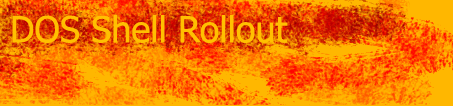
<style>
.page{position:relative;width:453px;height:106px}
.page>*{position:absolute;margin:0}
.t1{font:36px "Tahoma";color:#ffc000}
</style>
<div class="page">
<p class="t1" style="left:12px;top:15px;width:276px;height:28px">DOS Shell Rollout</p>
</div>
